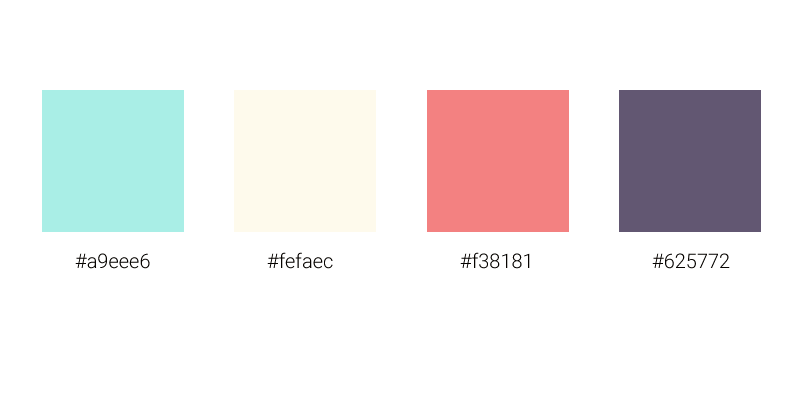
<style>
.page{position:relative;width:800px;height:400px;background:#ffffff}
.page>*{position:absolute;margin:0}
.t1{font:20px "Roboto-Light";color:#060300}
</style>
<div class="page">
<p class="t1" style="left:75px;top:253px;width:75px;height:16px">#a9eee6</p>
<p class="t1" style="left:267px;top:252px;width:66px;height:17px">#fefaec</p>
<p class="t1" style="left:460px;top:252px;width:70px;height:17px">#f38181</p>
<p class="t1" style="left:652px;top:253px;width:78px;height:16px">#625772</p>
</div>
